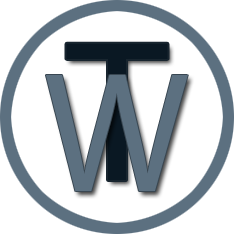
<style>
.page{position:relative;width:234px;height:234px;background:#ffffff}
.page>*{position:absolute;margin:0}
.t1{font:202px "MyriadPro-Regular";color:#0a1823}
.t2{font:172px "MyriadPro-Regular";color:#5c7080}
</style>
<div class="page">
<p class="t1" style="left:66px;top:43px;width:102px;height:137px">T</p>
<p class="t2" style="left:46px;top:75px;width:142px;height:116px">W</p>
</div>
